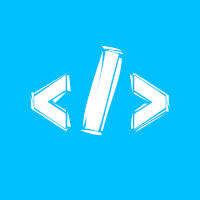
<style>
.page{position:relative;width:200px;height:200px;background:#00c0ff}
.page>*{position:absolute;margin:0}
.t1{font:117px "ARDARLING";color:#ffffff}
</style>
<div class="page">
<p class="t1" style="left:30px;top:46px;width:140px;height:89px">&lt;/&gt;</p>
</div>
